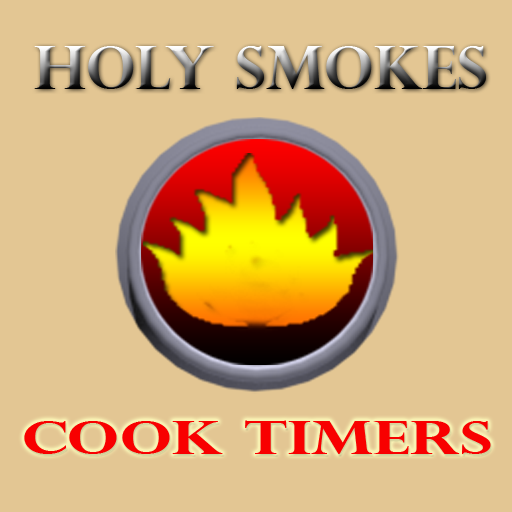
<style>
.page{position:relative;width:512px;height:512px;background:#e3c693}
.page>*{position:absolute;margin:0}
.t1{font:60px "PerpetuaTitlingMT-Bold"}
.t2{font:45.9px "PerpetuaTitlingMT-Bold";color:#f80000;scale:1.38 1}
</style>
<div class="page">
<p class="t1" style="left:34px;top:46px;width:452px;height:43px">Holy Smokes</p>
<p class="t2" style="left:24px;top:420px;width:467px;height:34px">Cook Timers</p>
</div>
